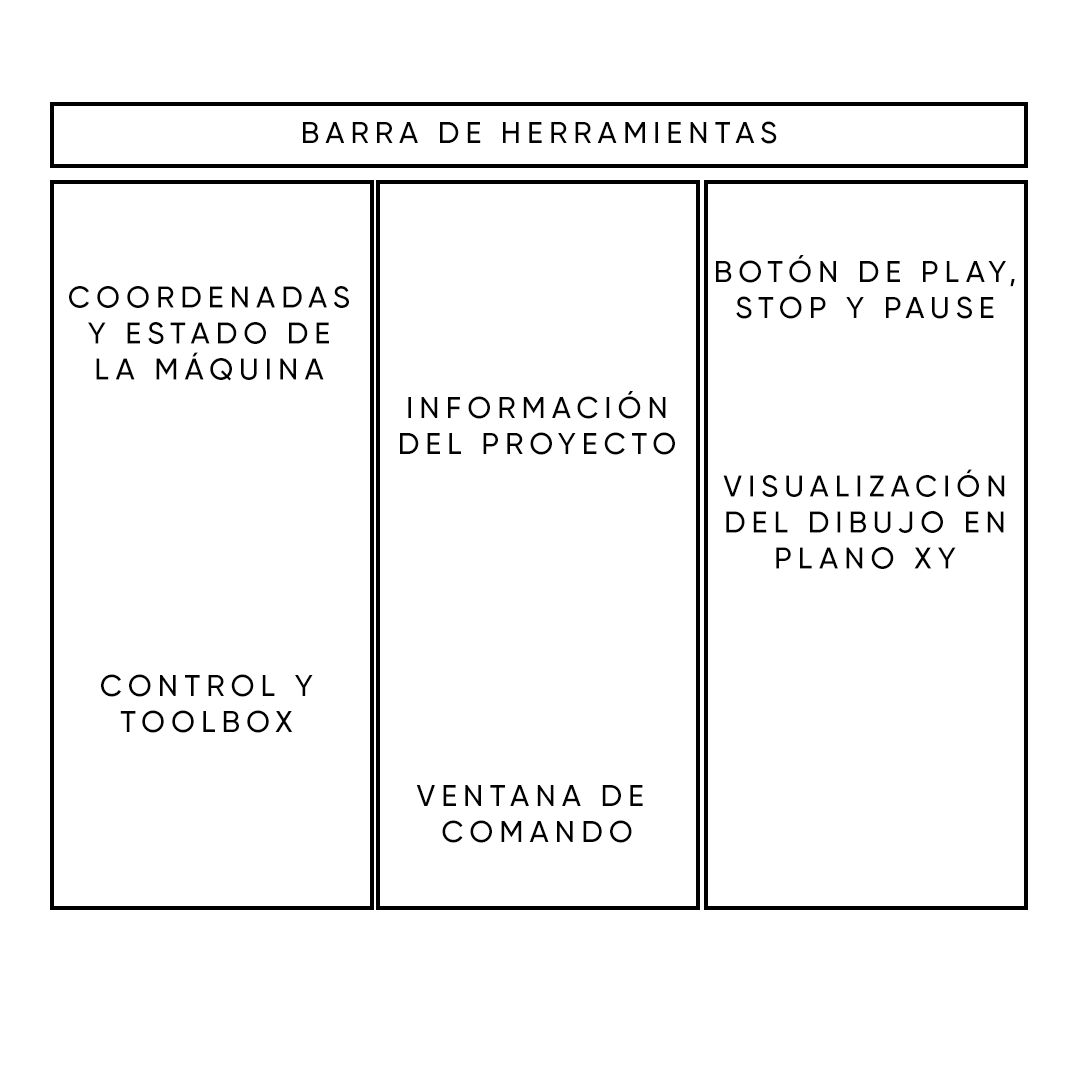
<style>
.page{position:relative;width:1080px;height:1080px;background:#ffffff}
.page>*{position:absolute;margin:0}
.t1{font:30px "Gilroy-Medium";letter-spacing:0.2em;color:#000000;text-transform:uppercase}
</style>
<div class="page">
<p class="t1" style="left:303px;top:121px;width:474px;height:23px">Barra de herramientas</p>
<p class="t1" style="left:716px;top:255px;width:299px;height:64px;text-align:center">Botón de play,<br>stop y pause</p>
<p class="t1" style="left:69px;top:286px;width:280px;height:95px;text-align:center">coordenadas<br>y estado de<br>la máquina</p>
<p class="t1" style="left:400px;top:391px;width:275px;height:64px;text-align:center">Información<br>del proyecto</p>
<p class="t1" style="left:723px;top:469px;width:282px;height:100px;text-align:center">visualización<br>del dibujo en<br>plano xY</p>
<p class="t1" style="left:101px;top:674px;width:212px;height:59px;text-align:center">control y<br>toolbox</p>
<p class="t1" style="left:416px;top:785px;width:227px;height:58px;text-align:center">Ventana de <br>comando</p>
</div>
